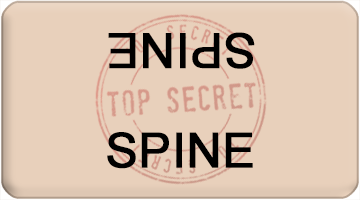
<style>
.page{position:relative;width:360px;height:200px;background:#e8d0bb}
.page>*{position:absolute;margin:0}
.t1{font:48px "ArialMT";color:#000000;font-weight:bold}
</style>
<div class="page">
<p class="t1" style="left:108px;top:32px;width:147px;height:37px;rotate:180deg">SPINE</p>
<p class="t1" style="left:107px;top:132px;width:146px;height:37px">SPINE</p>
</div>
